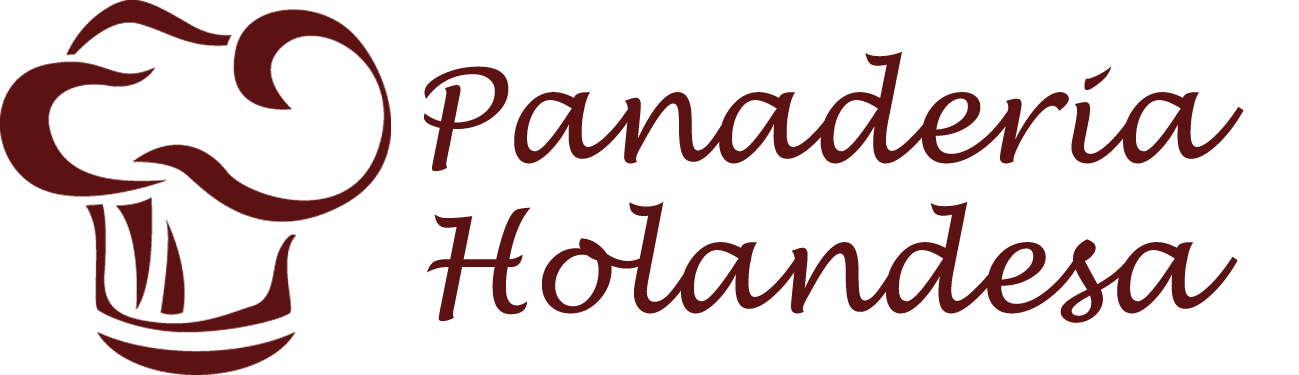
<style>
.page{position:relative;width:1299px;height:375px;background:#ffffff}
.page>*{position:absolute;margin:0}
.t1{font:220px/150px "LucidaHandwriting-Italic";color:#5c1112}
</style>
<div class="page">
<p class="t1" style="left:424px;top:52px;width:820px;height:271px;text-align:center">Panaderia<br>Holandesa</p>
</div>
